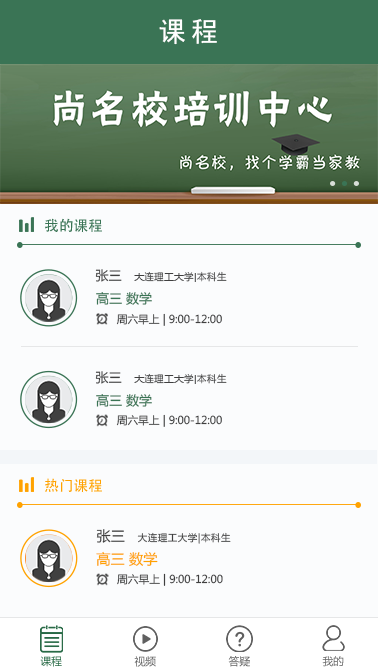
<style>
.page{position:relative;width:378px;height:672px;background:#fbfcfd}
.page>*{position:absolute;margin:0}
.t1{font:26.7px "SimHei";letter-spacing:0.2em;color:#ffffff}
.t2{font:14.7px "AdobeHeitiStd-Regular";color:#286a46}
.t3{font:9.5px "MicrosoftYaHei";letter-spacing:0.05em;color:#3f3f3f}
.t4{font:13px "MicrosoftYaHei";color:#3f3f3f}
.t5{font:13px "MicrosoftYaHei";color:#3a7455}
.t6{font:10.6px "MicrosoftYaHei";color:#3f3f3f}
.t7{font:14.7px "AdobeHeitiStd-Regular";color:#ffa200}
.t8{font:10.7px "MicrosoftYaHei";color:#3f3f3f}
.t9{font:14.3px "MicrosoftYaHei";color:#ffa200}
.t10{font:10.7px "MicrosoftYaHei";color:#286a46}
.t11{font:10.7px "MicrosoftYaHei";color:#606060}
.t12{font:10.7px "MicrosoftYaHei"}
</style>
<div class="page">
<p class="t1" style="left:159px;top:19px;width:58px;height:26px">课程</p>
<p class="t2" style="left:45px;top:218px;width:57px;height:15px">我的课程</p>
<p class="t3" style="left:95px;top:269px;width:132px;height:13px"><span class="t4">张三   </span>大连理工大学|本科生</p>
<p class="t5" style="left:96px;top:292px;width:56px;height:13px">高三 数学</p>
<p class="t6" style="left:116px;top:313px;width:106px;height:13px">周六早上 | 9:00-12:00</p>
<p class="t3" style="left:95px;top:371px;width:132px;height:13px"><span class="t4">张三   </span>大连理工大学|本科生</p>
<p class="t5" style="left:96px;top:394px;width:56px;height:13px">高三 数学</p>
<p class="t6" style="left:116px;top:414px;width:106px;height:13px">周六早上 | 9:00-12:00</p>
<p class="t7" style="left:45px;top:478px;width:57px;height:15px">热门课程</p>
<p class="t3" style="left:96px;top:529px;width:135px;height:15px"><span class="t8">张三   </span>大连理工大学|本科生</p>
<p class="t9" style="left:96px;top:551px;width:62px;height:16px">高三 数学</p>
<p class="t8" style="left:117px;top:573px;width:106px;height:13px">周六早上 | 9:00-12:00</p>
<p class="t10" style="left:40px;top:656px;width:22px;height:11px">课程</p>
<p class="t11" style="left:134px;top:656px;width:22px;height:11px">视频</p>
<p class="t12" style="left:228px;top:656px;width:22px;height:11px">答疑</p>
<p class="t11" style="left:322px;top:656px;width:22px;height:11px">我的</p>
</div>
